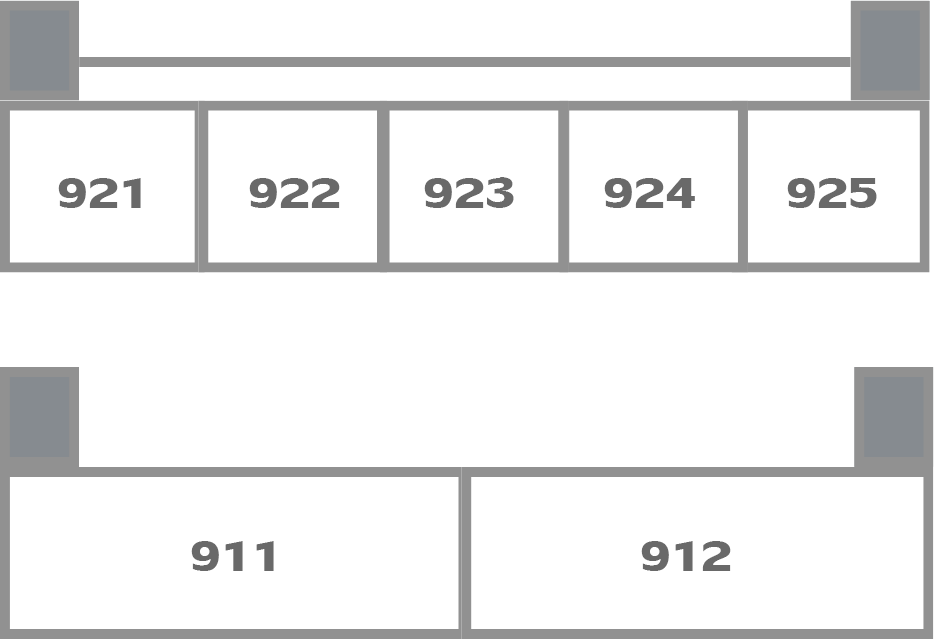
<style>
.page{position:relative;width:934px;height:639px;background:#ffffff}
.page>*{position:absolute;margin:0}
.t1{font:64.2px "LilyUPCBold";color:#696969}
</style>
<div class="page">
<p class="t1" style="left:58px;top:178px;width:83px;height:30px">921</p>
<p class="t1" style="left:249px;top:178px;width:91px;height:30px">922</p>
<p class="t1" style="left:424px;top:177px;width:90px;height:31px">923</p>
<p class="t1" style="left:604px;top:178px;width:91px;height:30px">924</p>
<p class="t1" style="left:787px;top:178px;width:90px;height:30px">925</p>
<p class="t1" style="left:191px;top:541px;width:83px;height:30px">911</p>
<p class="t1" style="left:641px;top:541px;width:90px;height:30px">912</p>
</div>
